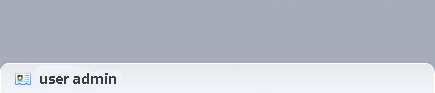
<style>
.page{position:relative;width:435px;height:93px;background:#a6acba}
.page>*{position:absolute;margin:0}
.t1{font:14px "MicrosoftYaHei-Bold";color:#3a3d47}
</style>
<div class="page">
<p class="t1" style="left:40px;top:73px;width:76px;height:11px">user admin</p>
</div>
